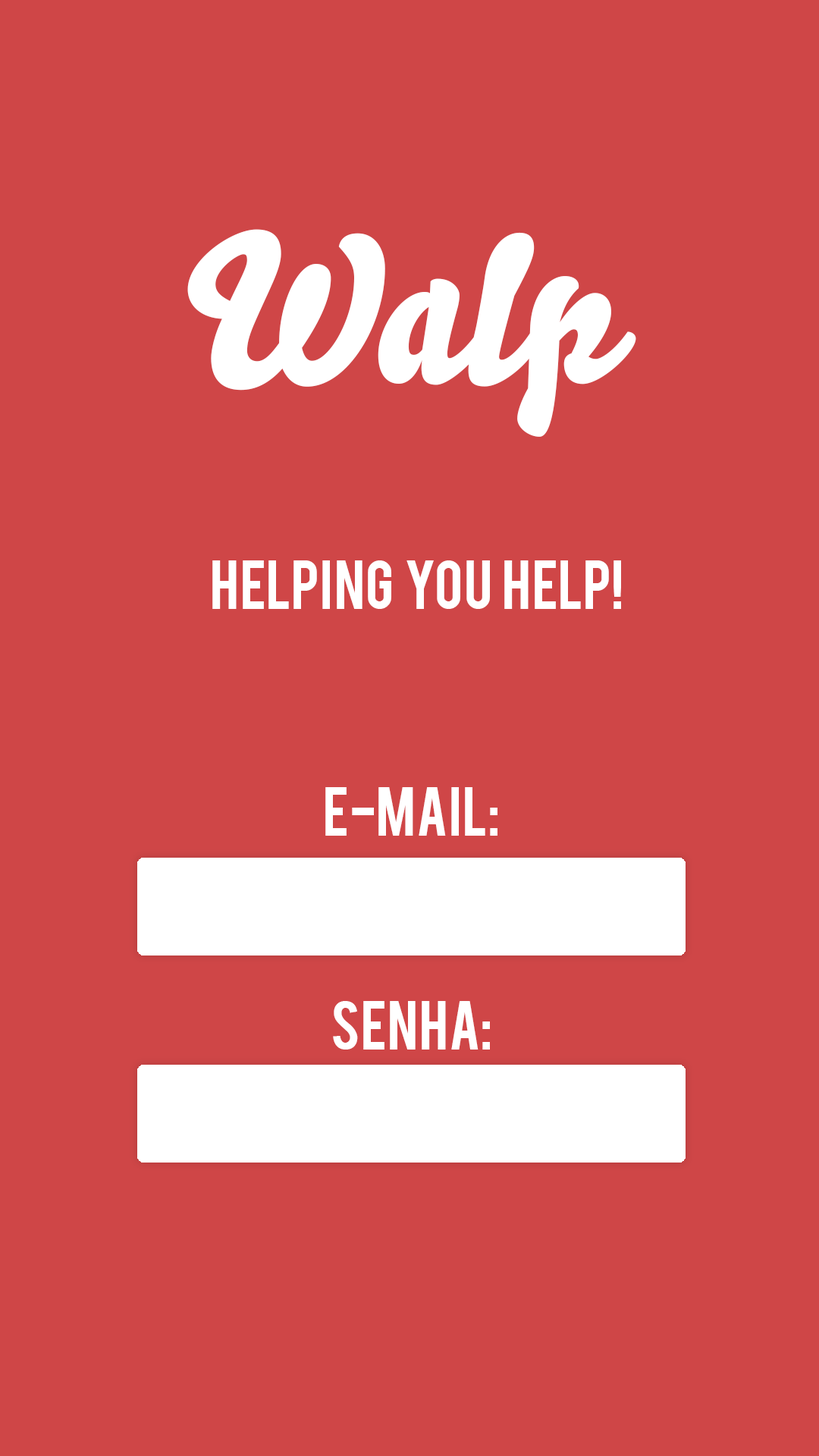
<style>
.page{position:relative;width:819px;height:1456px;background:#cf4647}
.page>*{position:absolute;margin:0}
.t1{font:206.2px "Bello-Pro";color:#ffffff}
.t2{font:54.6px "Bebas";color:#ffffff}
</style>
<div class="page">
<p class="t1" style="left:187px;top:229px;width:449px;height:208px">Walp</p>
<p class="t2" style="left:212px;top:560px;width:409px;height:49px">Helping  you  help!</p>
<p class="t2" style="left:325px;top:787px;width:172px;height:49px">E-MAIL:</p>
<p class="t2" style="left:333px;top:1001px;width:157px;height:49px">SENHA:</p>
</div>
